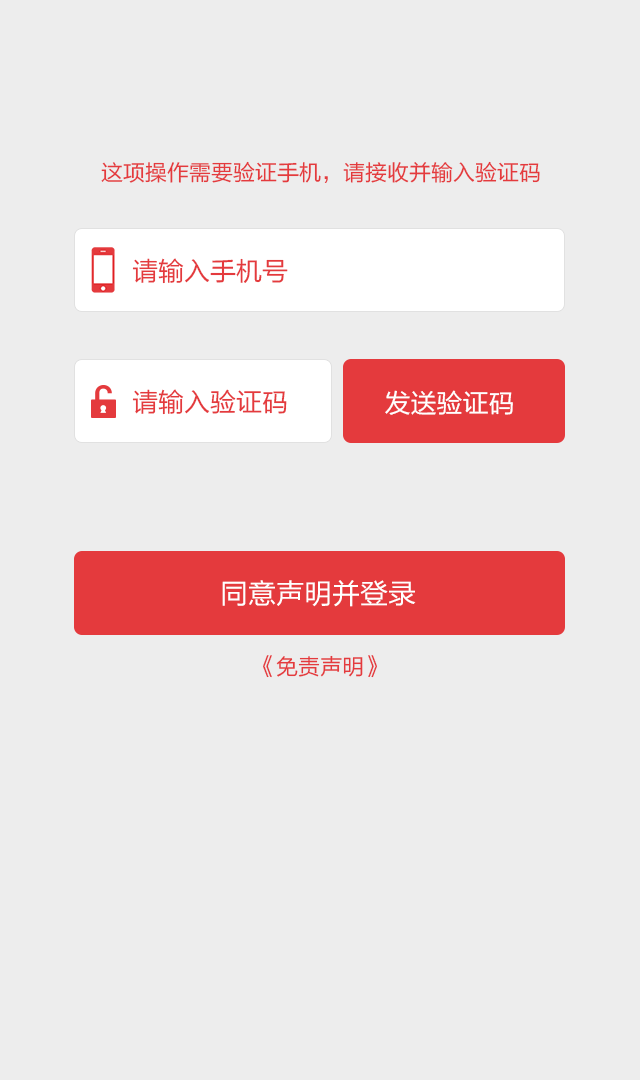
<style>
.page{position:relative;width:640px;height:1080px;background:#ededed}
.page>*{position:absolute;margin:0}
.t1{font:22px "FZLTHJW--GB1-0";color:#e43a3d}
.t2{font:26px "FZLTHJW--GB1-0";color:#e43a3d}
.t3{font:26px "FZLTHJW--GB1-0";color:#ffffff}
.t4{font:28px "FZLTHJW--GB1-0";color:#ffffff}
</style>
<div class="page">
<p class="t1" style="left:101px;top:161px;width:439px;height:22px">这项操作需要验证手机，请接收并输入验证码</p>
<p class="t2" style="left:132px;top:258px;width:156px;height:26px">请输入手机号</p>
<p class="t2" style="left:132px;top:389px;width:155px;height:26px">请输入验证码</p>
<p class="t3" style="left:385px;top:390px;width:128px;height:25px">发送验证码</p>
<p class="t4" style="left:222px;top:580px;width:194px;height:27px">同意声明并登录</p>
<p class="t1" style="left:263px;top:655px;width:114px;height:23px">《免责声明》</p>
</div>
